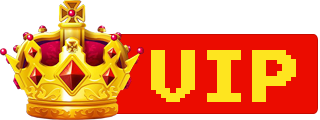
<style>
.page{position:relative;width:320px;height:120px;background:#ffffff}
.page>*{position:absolute;margin:0}
.t1{font:90px "8514oem";color:#fee51f;text-transform:uppercase;font-weight:bold;scale:1.2 1}
</style>
<div class="page">
<p class="t1" style="left:151px;top:50px;width:145px;height:52px">vip</p>
</div>
